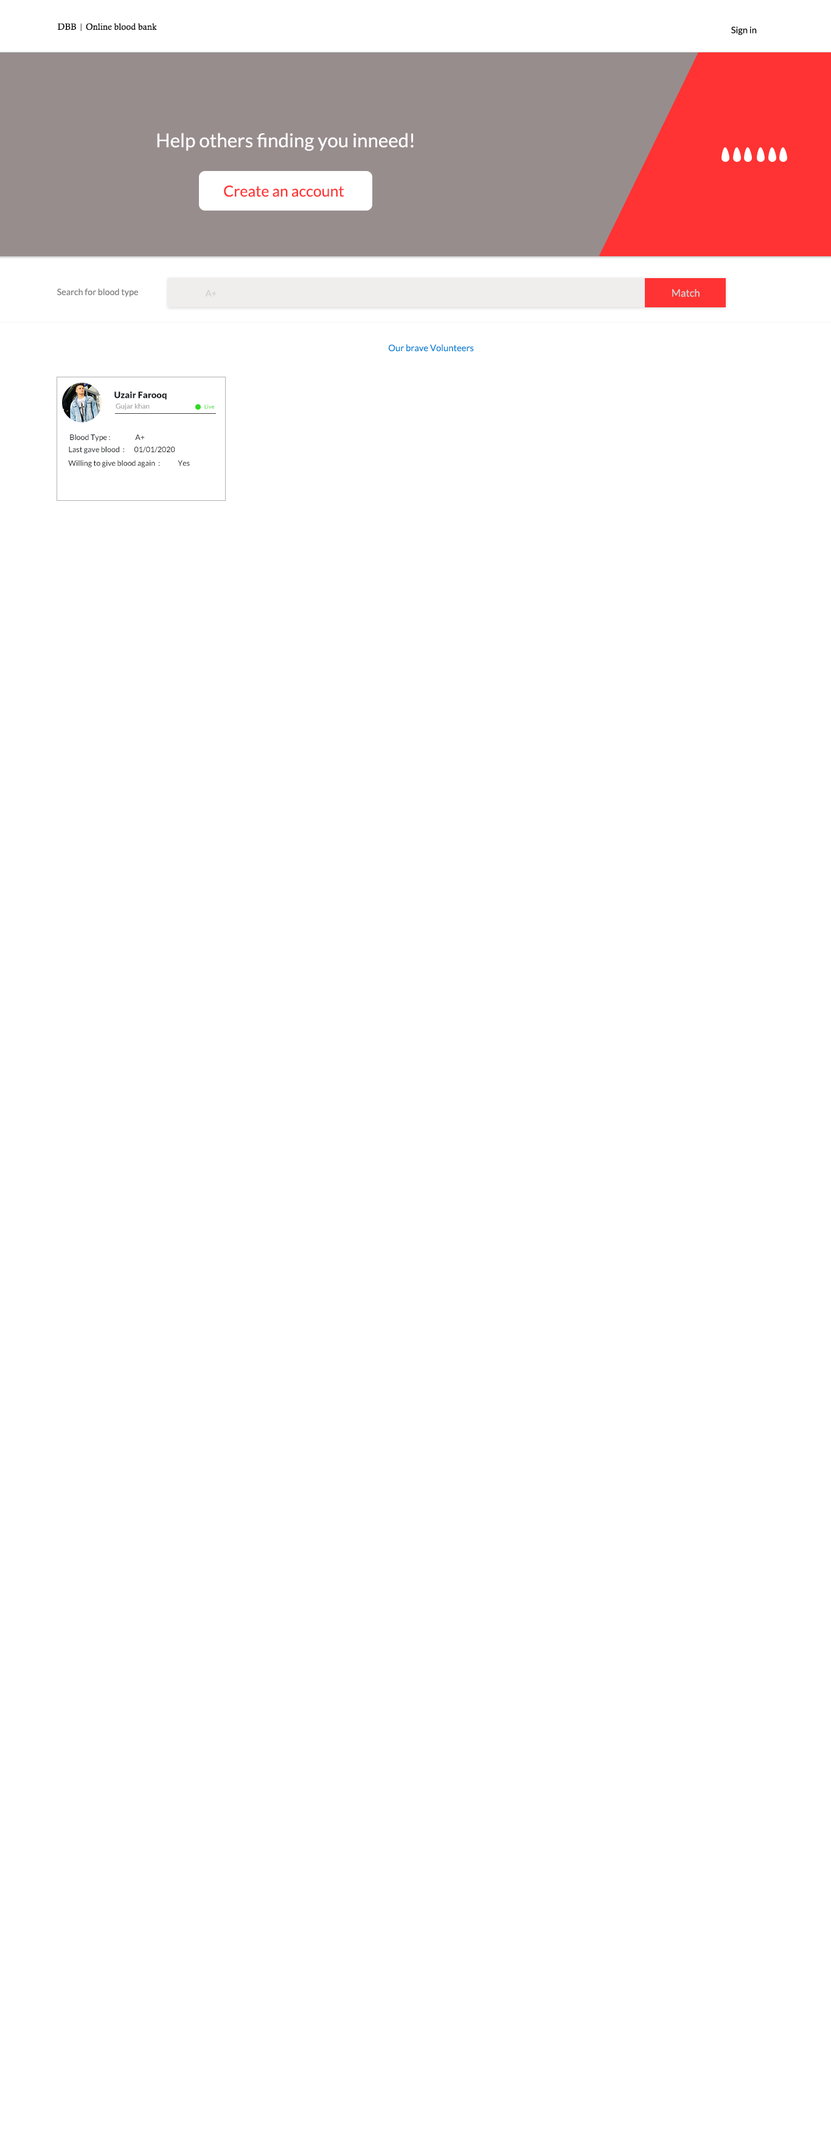
<style>
.page{position:relative;width:831px;height:2130px;background:#ffffff}
.page>*{position:absolute;margin:0}
.t1{font:9px "CalistoMT";color:#000000}
.t2{font:9px "Lato-Regular";color:#000000}
.t3{font:19px "Lato-Regular";color:#ffffff}
.t4{font:15.2px "Lato-Regular";color:#ff3333}
.t5{font:8.8px "Lato-Regular";color:#807d7d}
.t6{font:9px "Lato-Regular";color:#d1d1d1}
.t7{font:10.1px "Lato-Regular";color:#d1d1d1}
.t8{font:9px "Lato-Regular";color:#0e84d6}
.t9{font:9px "Lato-Black";color:#1d2023}
.t10{font:7.1px "Lato-Regular";color:#949698}
.t11{font:5.7px "Lato-Regular"}
.t12{font:7.6px "Lato-Regular";color:#191d22}
</style>
<div class="page">
<p class="t1" style="left:57px;top:23px;width:100px;height:8px">DBB | Online blood bank</p>
<p class="t2" style="left:731px;top:26px;width:26px;height:9px">Sign in</p>
<p class="t3" style="left:157px;top:133px;width:257px;height:18px">Help others finding you inneed!</p>
<p class="t4" style="left:224px;top:185px;width:120px;height:12px">Create an account</p>
<p class="t5" style="left:57px;top:288px;width:81px;height:9px">Search for blood type</p>
<p class="t6" style="left:205px;top:290px;width:12px;height:7px">A+</p>
<p class="t7" style="left:672px;top:289px;width:28px;height:8px">Match</p>
<p class="t8" style="left:388px;top:344px;width:86px;height:8px">Our brave Volunteers</p>
<p class="t9" style="left:114px;top:391px;width:53px;height:9px">Uzair Farooq</p>
<p class="t10" style="left:116px;top:403px;width:34px;height:7px">Gujar khan</p>
<p class="t11" style="left:204px;top:404px;width:11px;height:5px">Live</p>
<p class="t12" style="left:70px;top:434px;width:75px;height:8px">Blood Type :  A+</p>
<p class="t12" style="left:69px;top:446px;width:106px;height:8px">Last gave blood  : 01/01/2020</p>
<p class="t12" style="left:68px;top:460px;width:122px;height:7px">Willing to give blood again  : Yes</p>
</div>
